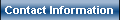
<style>
.page{position:relative;width:120px;height:20px}
.page>*{position:absolute;margin:0}
.t1{font:11px "Arial-BoldMT";color:#ffffff}
</style>
<div class="page">
<p class="t1" style="left:5px;top:6px;width:108px;height:8px">Contact Information</p>
</div>
